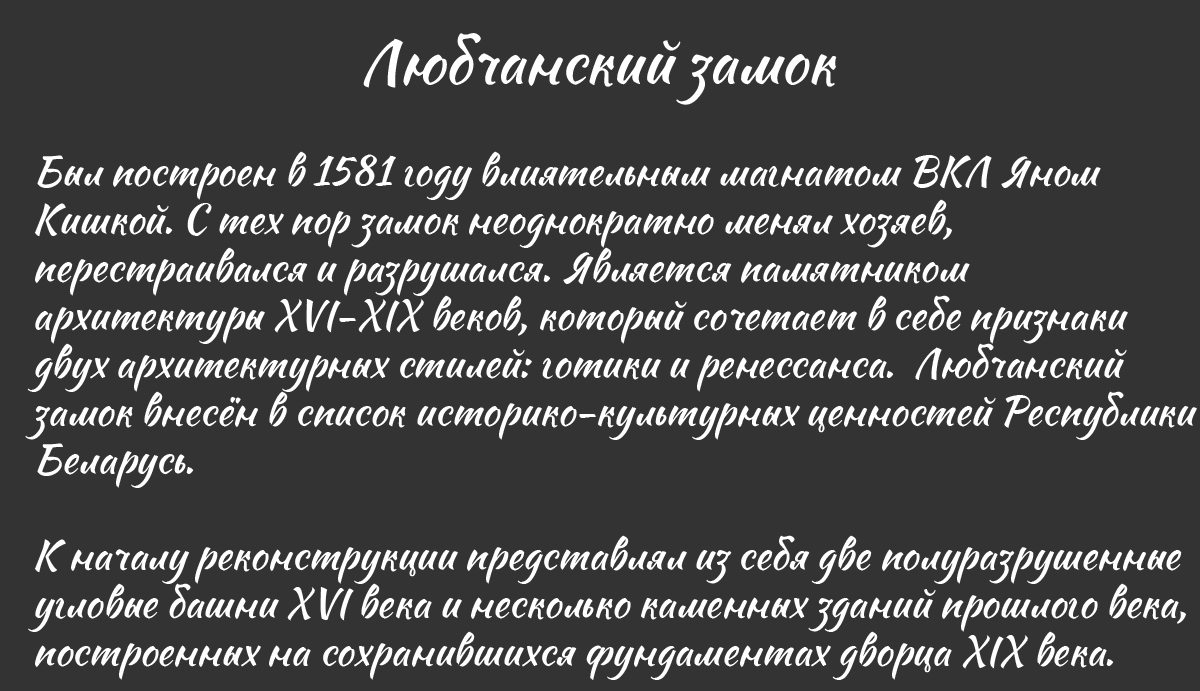
<style>
.page{position:relative;width:1200px;height:691px;background:#333333}
.page>*{position:absolute;margin:0}
.t1{font:60px "Sweet-Mavka-Script";color:#ffffff}
.t2{font:40px "Sweet-Mavka-Script";color:#ffffff}
</style>
<div class="page">
<p class="t1" style="left:363px;top:33px;width:474px;height:72px">Любчанский замок</p>
<p class="t2" style="left:25px;top:151px;width:1172px;height:529px">Был построен в 1581 году влиятельным магнатом ВКЛ Яном <br>Кишкой. С тех пор замок неоднократно менял хозяев,  <br>перестраивался и разрушался. Является памятником <br>архитектуры ХVI-XIX веков, который сочетает в себе признаки <br>двух архитектурных стилей: готики и ренессанса.  Любчанский <br>замок внесён в список историко-культурных ценностей Республики<br>Беларусь.<br><br>К началу реконструкции представлял из себя две полуразрушенные <br>угловые башни XVI века и несколько каменных зданий прошлого века,<br>построенных на сохранившихся фундаментах дворца XIX века.</p>
</div>
